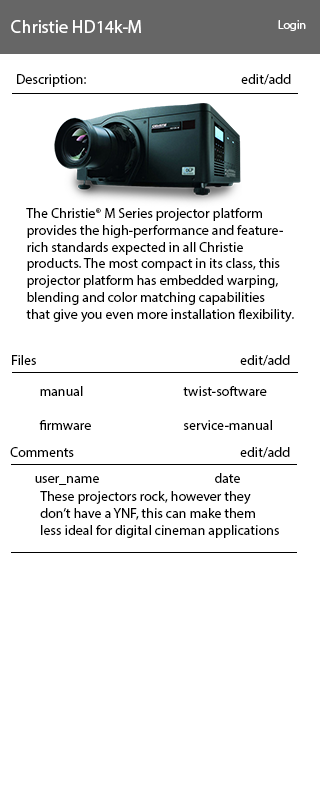
<style>
.page{position:relative;width:320px;height:800px;background:#ffffff}
.page>*{position:absolute;margin:0}
.t1{font:18px "MyriadPro-Regular";color:#ffffff}
.t2{font:12px "MyriadPro-Regular";color:#ffffff}
.t3{font:14px "MyriadPro-Regular";color:#000000}
</style>
<div class="page">
<p class="t1" style="left:11px;top:20px;width:130px;height:13px">Christie HD14k-M</p>
<p class="t2" style="left:278px;top:20px;width:28px;height:11px">Login</p>
<p class="t3" style="left:17px;top:74px;width:69px;height:13px">Description:</p>
<p class="t3" style="left:241px;top:74px;width:50px;height:11px">edit/add</p>
<p class="t3" style="left:26px;top:208px;width:268px;height:114px">The Christie® M Series projector platform <br>provides the high-performance and feature-<br>rich standards expected in all Christie <br>products. The most compact in its class, this <br>projector platform has embedded warping, <br>blending and color matching capabilities <br>that give you even more installation flexibility.</p>
<p class="t3" style="left:12px;top:355px;width:24px;height:10px">Files</p>
<p class="t3" style="left:240px;top:355px;width:50px;height:11px">edit/add</p>
<p class="t3" style="left:39px;top:386px;width:233px;height:44px">manual   twist-software<br> <br>firmware    service-manual</p>
<p class="t3" style="left:10px;top:447px;width:64px;height:10px">Comments</p>
<p class="t3" style="left:240px;top:447px;width:50px;height:11px">edit/add</p>
<p class="t3" style="left:35px;top:473px;width:205px;height:12px">user_name    date</p>
<p class="t3" style="left:40px;top:491px;width:239px;height:47px">These projectors rock, however they<br>don’t have a YNF, this can make them <br>less ideal for digital cineman applications</p>
</div>
